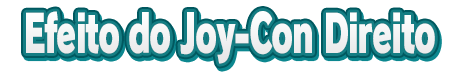
<style>
.page{position:relative;width:460px;height:72px;background:#ffffff}
.page>*{position:absolute;margin:0}
.t1{font:52px "RodinPro-UB";letter-spacing:-0.039em;color:#f3f3f4;scale:0.61 1}
</style>
<div class="page">
<p class="t1" style="left:26px;top:11px;width:409px;height:53px">Efeito do Joy-Con Direito</p>
</div>
